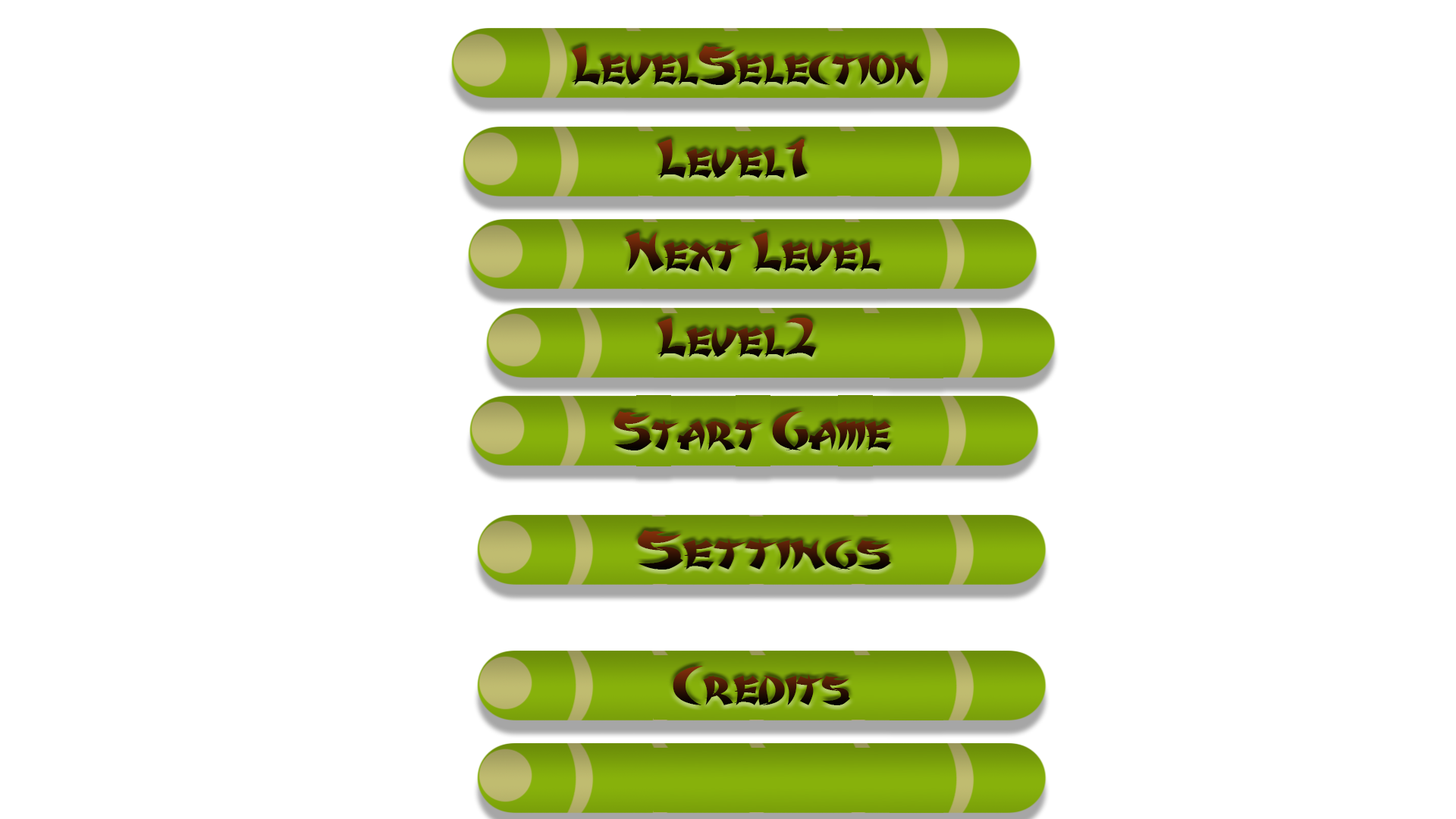
<style>
.page{position:relative;width:1456px;height:819px;background:#ffffff}
.page>*{position:absolute;margin:0}
.t1{font:50.4px "Karate"}
.t2{font:50.4px "Karate";scale:1.21 1}
</style>
<div class="page">
<p class="t1" style="left:571px;top:45px;width:353px;height:41px">LevelSelection</p>
<p class="t1" style="left:657px;top:139px;width:151px;height:40px">Level1</p>
<p class="t1" style="left:625px;top:232px;width:255px;height:40px">Next Level</p>
<p class="t1" style="left:657px;top:318px;width:160px;height:40px">Level2</p>
<p class="t1" style="left:613px;top:411px;width:279px;height:39px">Start Game</p>
<p class="t2" style="left:637px;top:530px;width:254px;height:40px">Settings</p>
<p class="t1" style="left:673px;top:666px;width:177px;height:39px">Credits</p>
</div>
